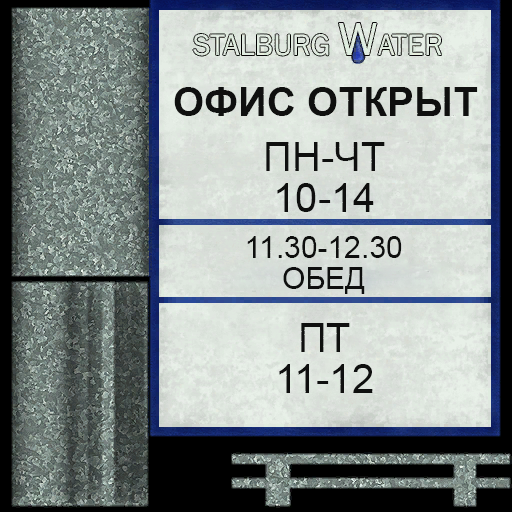
<style>
.page{position:relative;width:512px;height:512px}
.page>*{position:absolute;margin:0}
.t1{font:40px "Arial-BoldMT";color:#000000}
.t2{font:40px/41px "ArialMT";color:#000000}
.t3{font:30px/31px "ArialMT";color:#000000}
</style>
<div class="page">
<p class="t1" style="left:174px;top:87px;width:304px;height:29px;opacity:0.97">ОФИС ОТКРЫТ</p>
<p class="t2" style="left:266px;top:142px;width:119px;height:70px;text-align:center;opacity:0.97">ПН-ЧТ<br>10-14</p>
<p class="t3" style="left:247px;top:236px;width:155px;height:58px;text-align:center;opacity:0.97">11.30-12.30<br>ОБЕД</p>
<p class="t2" style="left:279px;top:323px;width:94px;height:70px;text-align:center;opacity:0.97">ПТ<br>11-12</p>
</div>
